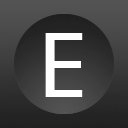
<style>
.page{position:relative;width:128px;height:128px}
.page>*{position:absolute;margin:0}
.t1{font:100px "Consolas";color:#ffffff}
</style>
<div class="page">
<p class="t1" style="left:45px;top:33px;width:38px;height:64px">E</p>
</div>
